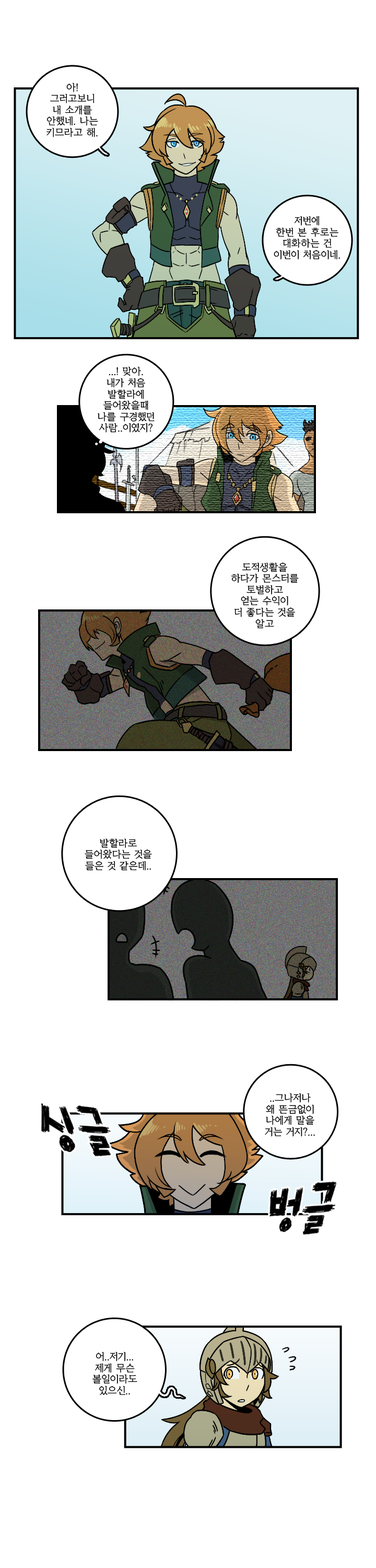
<style>
.page{position:relative;width:376px;height:1568px;background:#ffffff}
.page>*{position:absolute;margin:0}
.t1{font:9.4px "KoreanYMJ-B";color:#000000}
</style>
<div class="page">
<p class="t1" style="left:47px;top:83px;width:51px;height:54px;text-align:center">아!<br>그러고보니<br>내 소개를<br>안했네. 나는<br>키므라고 해.</p>
<p class="t1" style="left:274px;top:216px;width:66px;height:44px;text-align:center">저번에<br>한번 본 후로는<br>대화하는 건<br>이번이 처음이네.</p>
<p class="t1" style="left:98px;top:366px;width:57px;height:67px;text-align:center">...! 맞아.<br>내가 처음<br>발할라에<br>들어왔을때<br>나를 구경했던<br>사람..이였지?</p>
<p class="t1" style="left:231px;top:562px;width:68px;height:66px;text-align:center">도적생활을<br>하다가 몬스터를<br>토벌하고<br>얻는 수익이<br>더 좋다는 것을<br>알고</p>
<p class="t1" style="left:85px;top:838px;width:67px;height:33px;text-align:center">발할라로<br>들어왔다는 것을<br>들은 것 같은데..</p>
<p class="t1" style="left:265px;top:1093px;width:50px;height:44px;text-align:center">..그나저나<br>왜 뜬금없이<br>나에게 말을<br>거는 거지?...</p>
<p class="t1" style="left:93px;top:1352px;width:44px;height:43px;text-align:center">어..저기...<br>제게 무슨<br>볼일이라도<br>있으신..</p>
</div>
